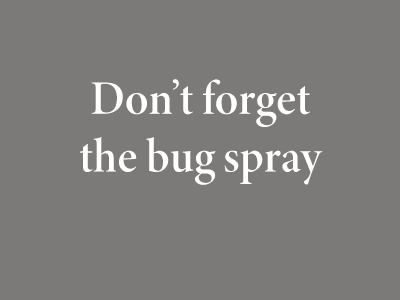
<style>
.page{position:relative;width:400px;height:300px;background:#7c7a79}
.page>*{position:absolute;margin:0}
.t1{font:48px "MinionConceptRoman-DisplaySemibold";color:#ffffff;font-weight:bold}
</style>
<div class="page">
<p class="t1" style="left:80px;top:79px;width:243px;height:106px;text-align:center">Don’t forget <br>the bug spray</p>
</div>
